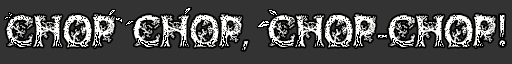
<style>
.page{position:relative;width:512px;height:64px;background:#333333}
.page>*{position:absolute;margin:0}
.t1{font:36px "JFWildWood";color:#fffffe}
.t2{font:36px "MyriadPro-Regular";color:#fffffe}
.t3{font:45px "MyriadPro-Regular";color:#fffffe}
</style>
<div class="page">
<p class="t1" style="left:6px;top:14px;width:499px;height:36px">CHOP CHOP<span class="t2">,</span> CHOP<span class="t2">-</span>CHOP<span class="t3">!</span></p>
</div>
